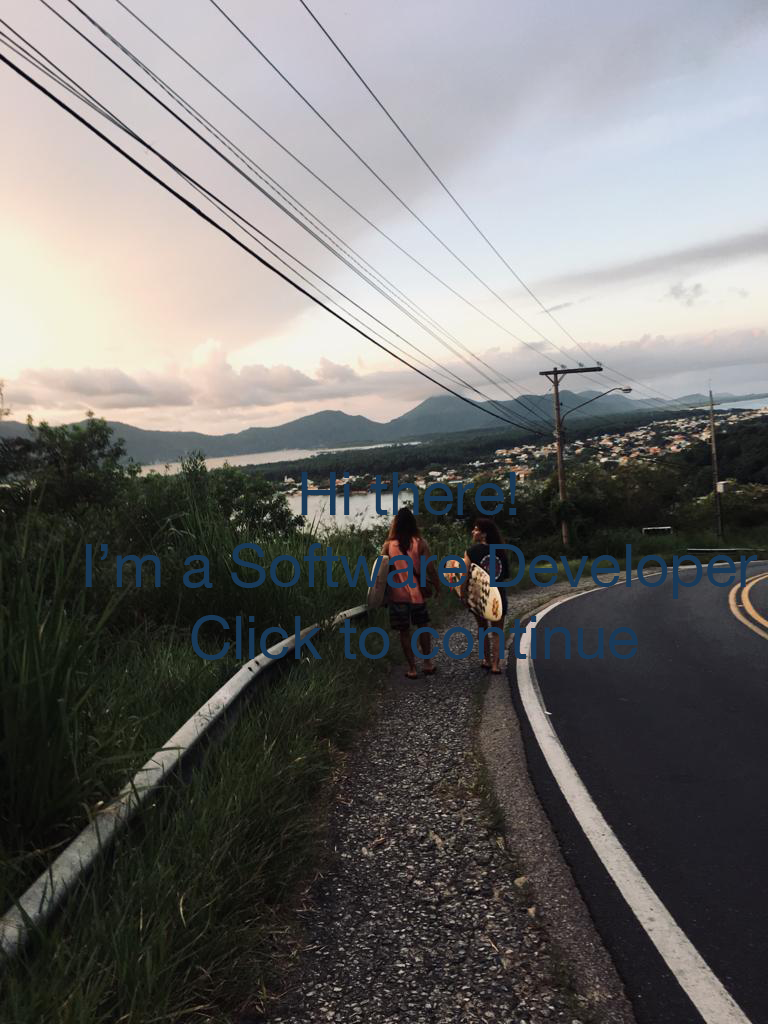
<style>
.page{position:relative;width:768px;height:1024px}
.page>*{position:absolute;margin:0}
.t1{font:60px "HelveticaNeue";color:#183958}
.t2{font:60px "HelveticaNeue";color:#1188e4}
</style>
<div class="page">
<p class="t1" style="left:85px;top:472px;width:672px;height:188px"><span class="t2">      </span>Hi there! <br>I’m a Software Developer<br>   Click to continue</p>
</div>
